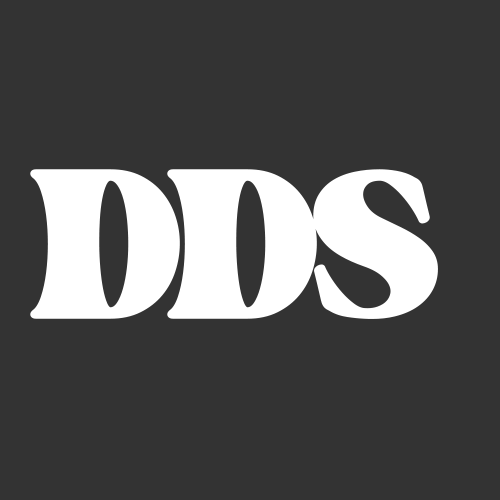
<style>
.page{position:relative;width:500px;height:500px;background:#333333}
.page>*{position:absolute;margin:0}
.t1{font:200px "Vorlesta-Regular";letter-spacing:-0.05em;color:#ffffff;font-weight:bold}
</style>
<div class="page">
<p class="t1" style="left:30px;top:169px;width:408px;height:150px">DDS</p>
</div>
